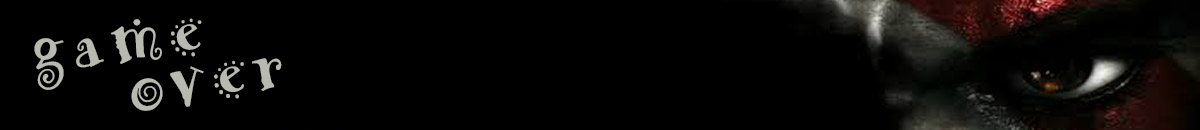
<style>
.page{position:relative;width:1200px;height:130px;background:#000000}
.page>*{position:absolute;margin:0}
.t1{font:72px "ARHERMANN";letter-spacing:0.1em;color:#b8baaf}
</style>
<div class="page">
<p class="t1" style="left:34px;top:18px;width:168px;height:72px;rotate:-8deg">game</p>
<p class="t1" style="left:131px;top:58px;width:151px;height:53px;rotate:-10deg">over</p>
</div>
